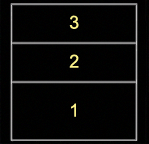
<style>
.page{position:relative;width:149px;height:144px}
.page>*{position:absolute;margin:0}
.t1{font:18px "ArialMT";color:#fbf28a;font-variant:small-caps}
</style>
<div class="page">
<p class="t1" style="left:69px;top:15px;width:10px;height:14px">3</p>
<p class="t1" style="left:69px;top:54px;width:10px;height:14px">2</p>
<p class="t1" style="left:71px;top:103px;width:5px;height:14px">1</p>
</div>
